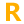
<style>
.page{position:relative;width:24px;height:24px;background:#ffffff}
.page>*{position:absolute;margin:0}
.t1{font:26px "LaoUI-Bold";color:#ffae00}
</style>
<div class="page">
<p class="t1" style="left:6px;top:2px;width:16px;height:19px">R</p>
</div>
